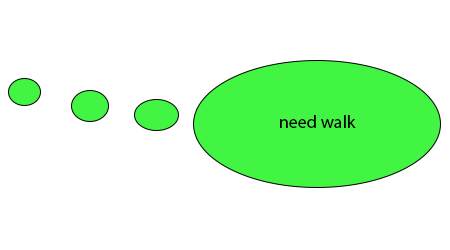
<style>
.page{position:relative;width:450px;height:250px;background:#ffffff}
.page>*{position:absolute;margin:0}
.t1{font:18px "MyriadPro-Regular";color:#000000}
</style>
<div class="page">
<p class="t1" style="left:280px;top:115px;width:76px;height:13px">need walk</p>
</div>
